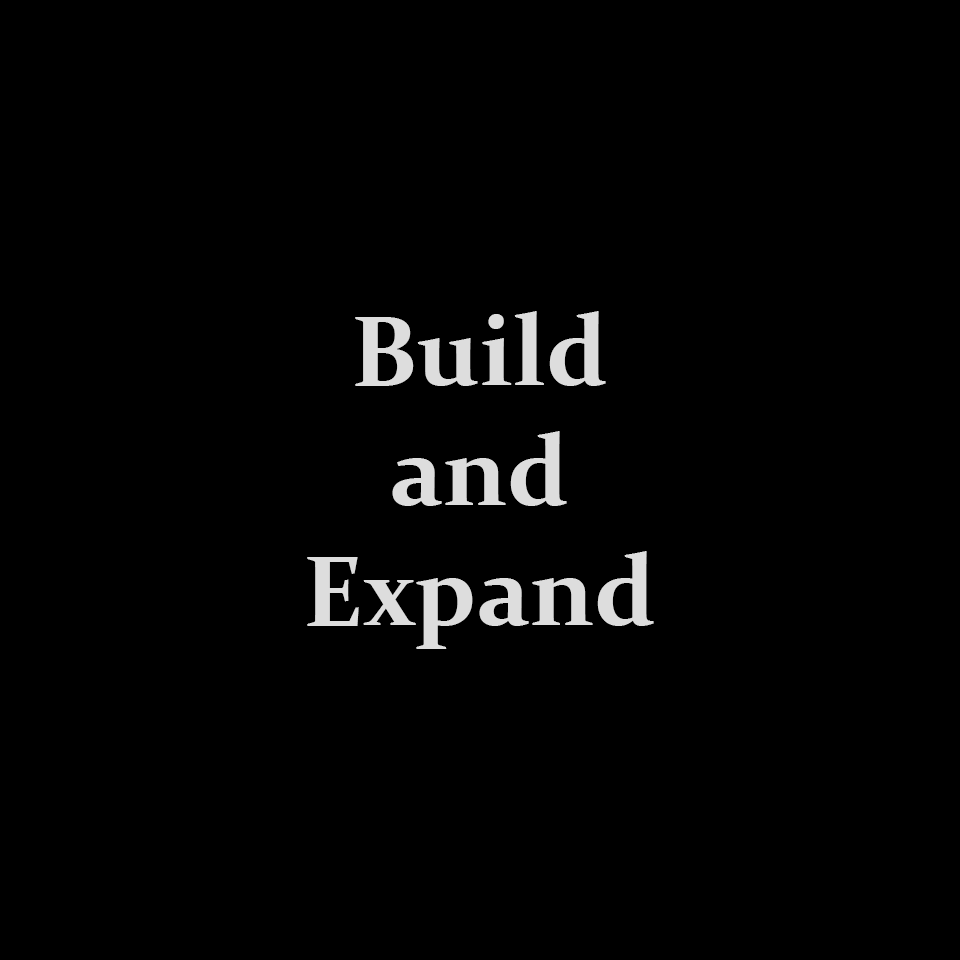
<style>
.page{position:relative;width:960px;height:960px;background:#000000}
.page>*{position:absolute;margin:0}
.t1{font:100px "Constantia-Bold";color:#dddddd}
</style>
<div class="page">
<p class="t1" style="left:307px;top:311px;width:347px;height:338px;text-align:center">Build<br>and<br>Expand</p>
</div>
